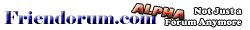
<style>
.page{position:relative;width:250px;height:30px;background:#ffffff}
.page>*{position:absolute;margin:0}
.t1{font:12px "GillSans-UltraBold";letter-spacing:0.005em}
.t2{font:18px "Elephant-Regular";letter-spacing:0.005em}
</style>
<div class="page">
<p class="t1" style="left:131px;top:4px;width:53px;height:16px;rotate:9deg">ALPHA</p>
<p class="t2" style="left:4px;top:11px;width:153px;height:13px">Friendorum.com</p>
</div>
